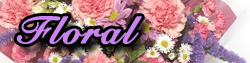
<style>
.page{position:relative;width:250px;height:63px}
.page>*{position:absolute;margin:0}
.t1{font:37.5px "SnellRoundhand-Bold";letter-spacing:0.05em;color:#c984ed;font-weight:bold}
</style>
<div class="page">
<p class="t1" style="left:16px;top:16px;width:126px;height:29px">Floral</p>
</div>
